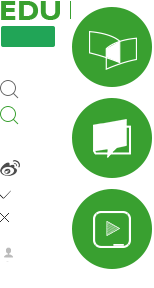
<style>
.page{position:relative;width:154px;height:288px;background:#ffffff}
.page>*{position:absolute;margin:0}
.t1{font:28px "GillSansMT-Bold";color:#39a030}
</style>
<div class="page">
<p class="t1" style="left:1px;top:1px;width:59px;height:19px">EDU</p>
</div>
